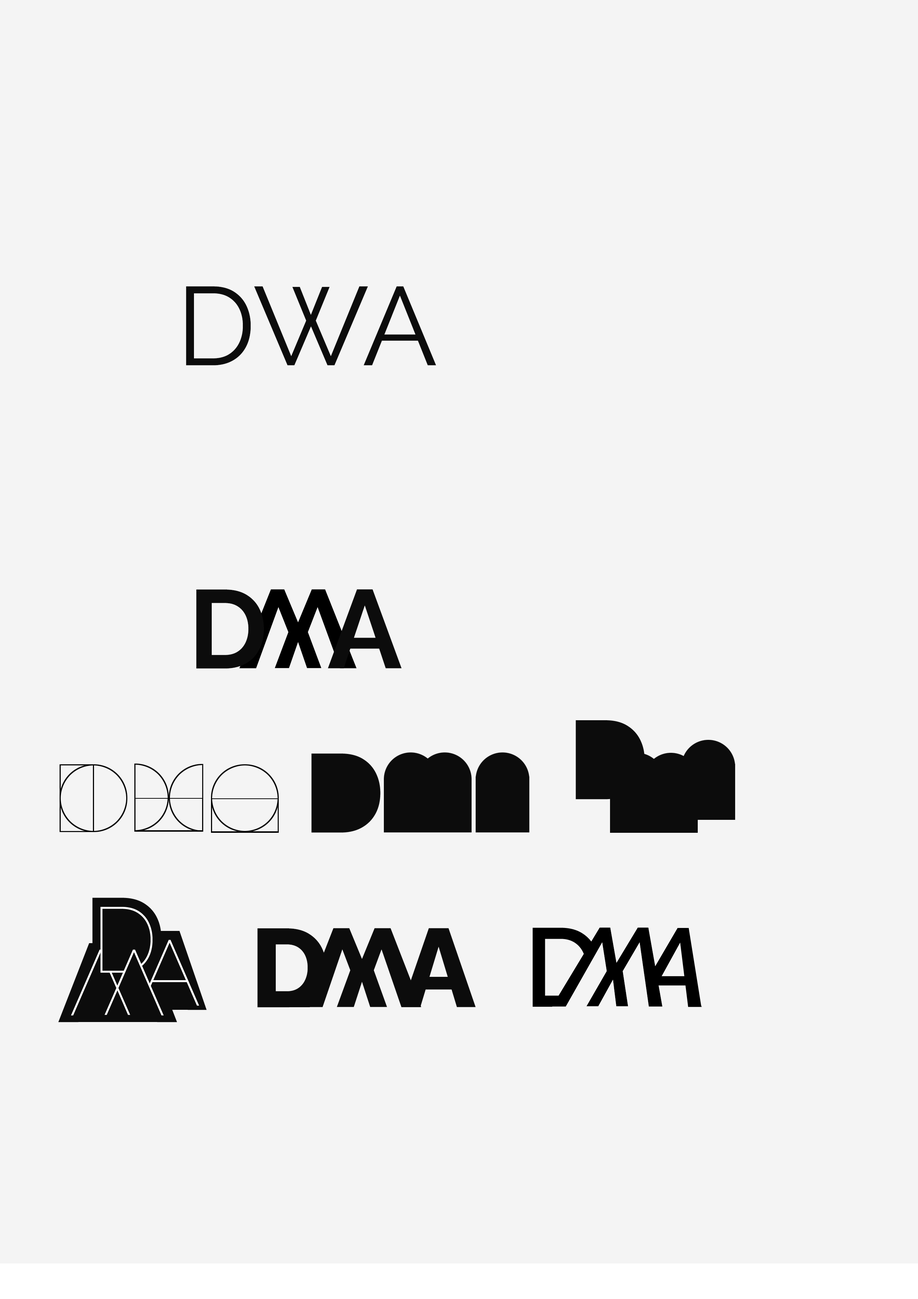
<style>
.page{position:relative;width:918px;height:1299px;background:#f4f4f4}
.page>*{position:absolute;margin:0}
.t1{font:111.1px "Raleway-Regular";color:#0c0c0c;text-transform:uppercase}
.t2{font:111.1px "Raleway-Bold";color:#0c0c0c;text-transform:uppercase}
.t3{font:111.1px "Raleway-Bold";color:#000000;text-transform:uppercase}
.t4{font:111.1px "Raleway-ExtraBold";color:#0c0c0c;text-transform:uppercase}
.t5{font:111.1px "Raleway-SemiBoldItalic";color:#000000;text-transform:uppercase}
</style>
<div class="page">
<p class="t1" style="left:186px;top:286px;width:250px;height:79px">dWa</p>
<p class="t2" style="left:196px;top:589px;width:68px;height:80px">d</p>
<p class="t3" style="left:239px;top:589px;width:118px;height:79px;rotate:180deg">w</p>
<p class="t2" style="left:328px;top:589px;width:74px;height:79px">A</p>
<p class="t4" style="left:257px;top:928px;width:70px;height:79px">d</p>
<p class="t4" style="left:302px;top:928px;width:119px;height:79px;rotate:180deg">w</p>
<p class="t4" style="left:402px;top:928px;width:74px;height:79px">A</p>
<p class="t5" style="left:552px;top:927px;width:111px;height:80px;rotate:180deg">W</p>
</div>
